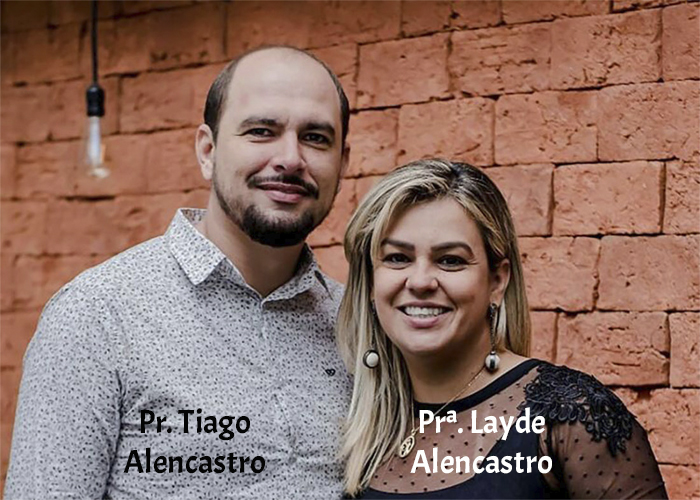
<style>
.page{position:relative;width:700px;height:500px}
.page>*{position:absolute;margin:0}
.t1{font:33.3px "Acme-Regular";color:#040404}
.t2{font:33.3px "Acme-Regular";color:#fefefd}
</style>
<div class="page">
<p class="t1" style="left:123px;top:408px;width:142px;height:66px;text-align:center">Pr. Tiago <br>Alencastro</p>
<p class="t2" style="left:410px;top:407px;width:142px;height:67px;text-align:center">Prª. Layde<br>Alencastro</p>
</div>
